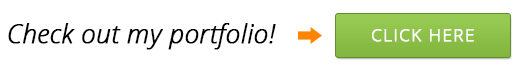
<style>
.page{position:relative;width:521px;height:70px;background:#ffffff}
.page>*{position:absolute;margin:0}
.t1{font:26.5px "OpenSansLight-Italic";letter-spacing:-0.013em;color:#000000;font-weight:bold}
.t2{font:17.4px "OpenSans-Light";letter-spacing:0.05em;color:#ffffff;font-weight:bold}
</style>
<div class="page">
<p class="t1" style="left:8px;top:23px;width:268px;height:27px">Check out my portfolio!</p>
<p class="t2" style="left:372px;top:29px;width:102px;height:13px">CLICK HERE</p>
</div>
